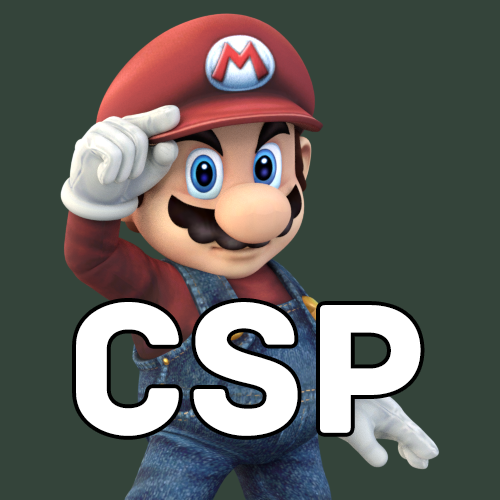
<style>
.page{position:relative;width:500px;height:500px;background:#34443a}
.page>*{position:absolute;margin:0}
.t1{font:193.9px "Archive";color:#ffffff}
</style>
<div class="page">
<p class="t1" style="left:76px;top:302px;width:345px;height:134px">CSP</p>
</div>
